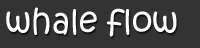
<style>
.page{position:relative;width:200px;height:48px;background:#333333}
.page>*{position:absolute;margin:0}
.t1{font:33px "KristenITC-Regular";color:#ffffff}
</style>
<div class="page">
<p class="t1" style="left:6px;top:7px;width:171px;height:30px">whale flow</p>
</div>
